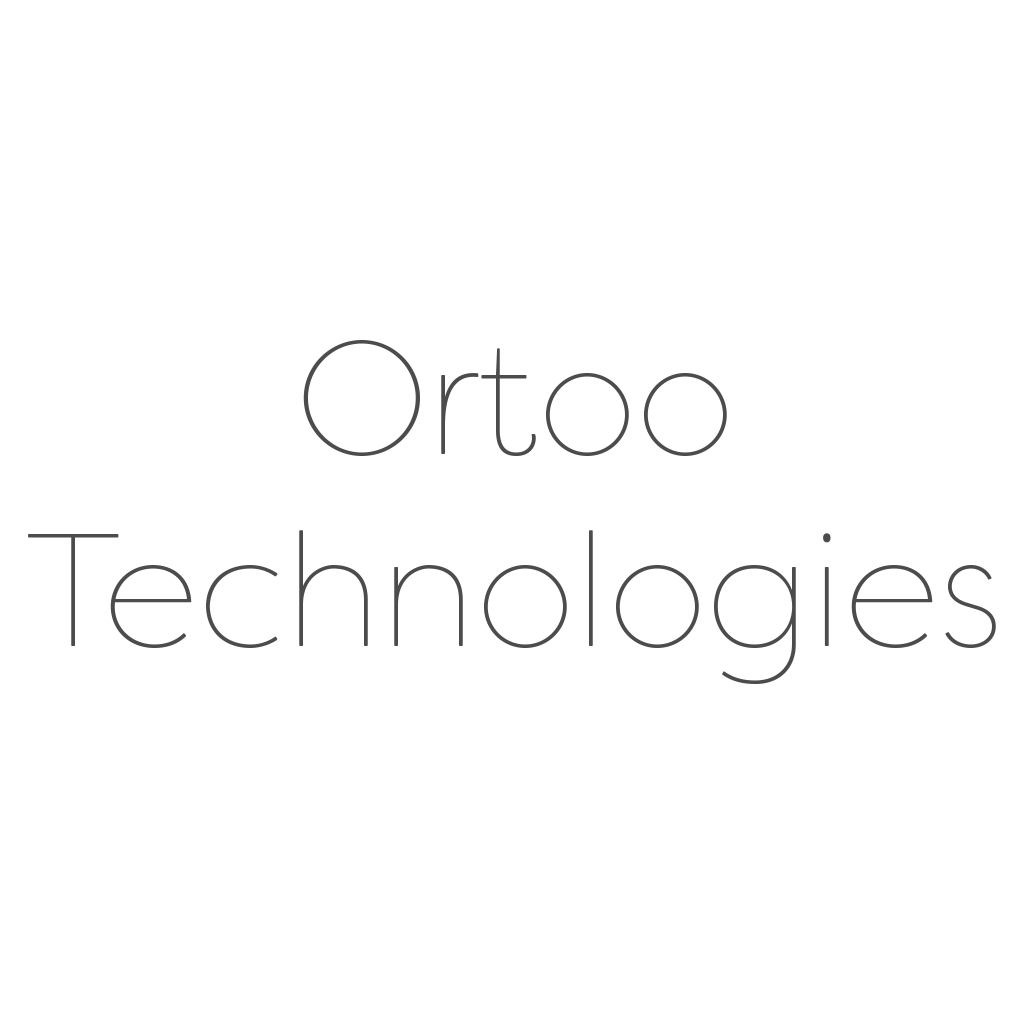
<style>
.page{position:relative;width:1024px;height:1024px;background:#ffffff}
.page>*{position:absolute;margin:0}
.t1{font:160px "FilsonSoft-Thin";color:#4c4c4c}
</style>
<div class="page">
<p class="t1" style="left:28px;top:340px;width:968px;height:344px;text-align:center">Ortoo<br>Technologies</p>
</div>
